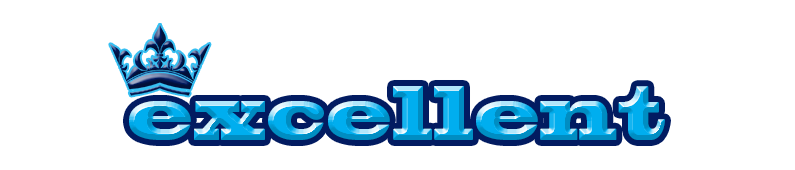
<style>
.page{position:relative;width:795px;height:170px;background:#ffffff}
.page>*{position:absolute;margin:0}
.t1{font:72.4px "BlackoakStd";scale:0.68 1}
</style>
<div class="page">
<p class="t1" style="left:129px;top:86px;width:536px;height:54px">excellent</p>
</div>
